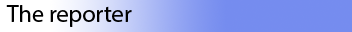
<style>
.page{position:relative;width:352px;height:32px;background:#758cef}
.page>*{position:absolute;margin:0}
.t1{font:24px "MyriadPro-Regular";color:#000000}
</style>
<div class="page">
<p class="t1" style="left:6px;top:5px;width:126px;height:22px">The reporter</p>
</div>
